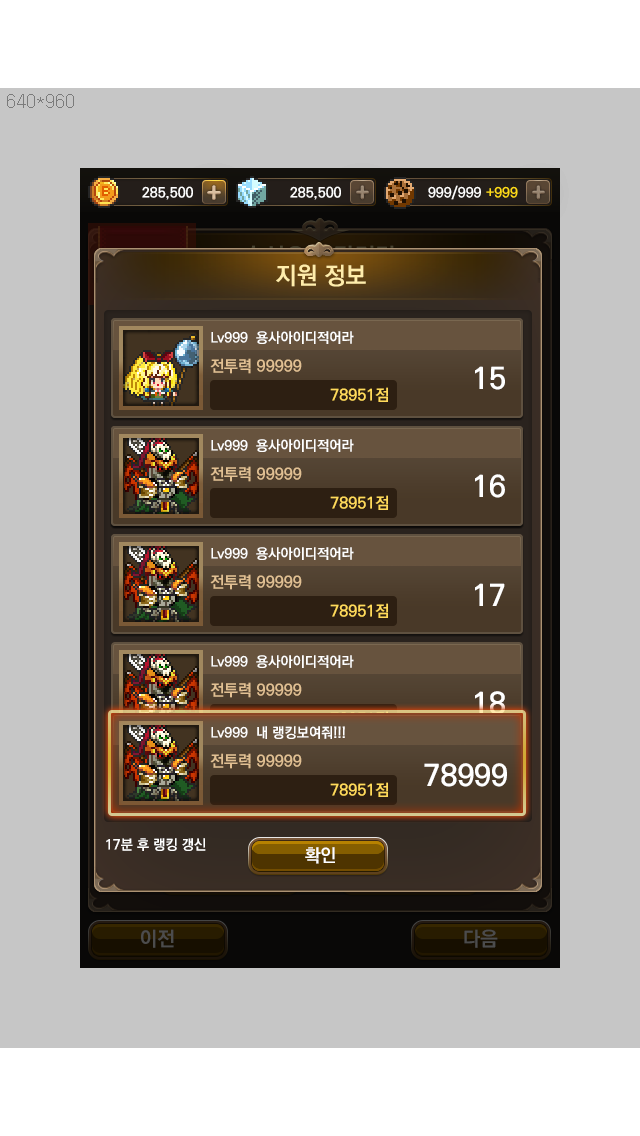
<style>
.page{position:relative;width:640px;height:1136px;background:#c6c6c6}
.page>*{position:absolute;margin:0}
.t1{font:24px "KoPubDotumBold";color:#ffedab}
.t2{font:14px "KoPubDotumBold";color:#ffffff}
.t3{font:16px "KoPubDotumBold";color:#e1c093}
.t4{font:30px "KoPubDotumBold";color:#ffffff}
.t5{font:16px "KoPubDotumBold";color:#ffda5b}
.t6{font:18px "KoPubDotumBold";color:#ffffff}
</style>
<div class="page">
<p class="t1" style="left:276px;top:264px;width:90px;height:23px">지원 정보</p>
<p class="t2" style="left:211px;top:331px;width:143px;height:13px">Lv999  용사아이디적어라</p>
<p class="t3" style="left:210px;top:358px;width:92px;height:16px">전투력 99999</p>
<p class="t4" style="left:475px;top:366px;width:30px;height:24px">15</p>
<p class="t5" style="left:330px;top:387px;width:58px;height:15px">78951점</p>
<p class="t2" style="left:211px;top:439px;width:143px;height:13px">Lv999  용사아이디적어라</p>
<p class="t2" style="left:211px;top:439px;width:143px;height:13px">Lv999  용사아이디적어라</p>
<p class="t2" style="left:211px;top:439px;width:143px;height:13px">Lv999  용사아이디적어라</p>
<p class="t3" style="left:210px;top:466px;width:92px;height:16px">전투력 99999</p>
<p class="t3" style="left:210px;top:466px;width:92px;height:16px">전투력 99999</p>
<p class="t3" style="left:210px;top:466px;width:92px;height:16px">전투력 99999</p>
<p class="t4" style="left:475px;top:474px;width:30px;height:24px">16</p>
<p class="t5" style="left:330px;top:495px;width:58px;height:15px">78951점</p>
<p class="t5" style="left:330px;top:495px;width:58px;height:15px">78951점</p>
<p class="t5" style="left:330px;top:495px;width:58px;height:15px">78951점</p>
<p class="t2" style="left:211px;top:547px;width:143px;height:13px">Lv999  용사아이디적어라</p>
<p class="t3" style="left:210px;top:574px;width:92px;height:16px">전투력 99999</p>
<p class="t4" style="left:475px;top:583px;width:30px;height:23px">17</p>
<p class="t5" style="left:330px;top:603px;width:58px;height:15px">78951점</p>
<p class="t4" style="left:475px;top:691px;width:30px;height:24px">18</p>
<p class="t2" style="left:211px;top:726px;width:134px;height:13px">Lv999  내 랭킹보여줘!!!</p>
<p class="t3" style="left:210px;top:753px;width:92px;height:16px">전투력 99999</p>
<p class="t4" style="left:424px;top:763px;width:83px;height:24px">78999</p>
<p class="t5" style="left:330px;top:782px;width:58px;height:15px">78951점</p>
<p class="t2" style="left:106px;top:838px;width:100px;height:13px">17분 후 랭킹 갱신</p>
<p class="t6" style="left:305px;top:847px;width:30px;height:17px">확인</p>
</div>
